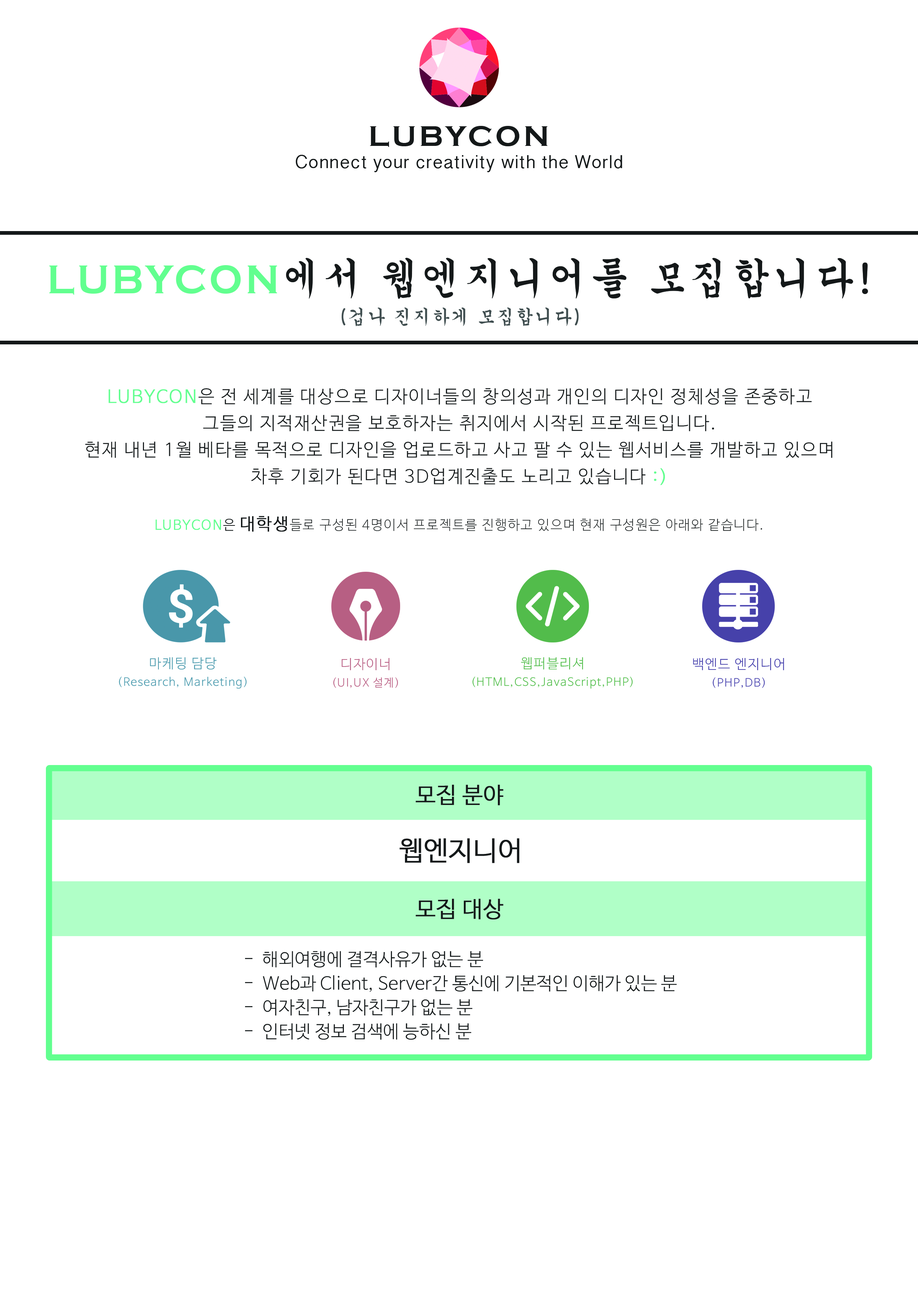
<style>
.page{position:relative;width:918px;height:1299px;background:#ffffff}
.page>*{position:absolute;margin:0}
.t1{font:29.6px "CopperplateGothic-Bold";letter-spacing:0.1em;color:#141819}
.t2{font:18.5px "TamilSangamMN";letter-spacing:0.05em;color:#141819}
.t3{font:42px/30.4px "Gungsuh";letter-spacing:0.075em;color:#141819;scale:0.93 1}
.t4{font:42px/30.4px "CopperplateGothic-Bold";letter-spacing:0.075em;color:#62ff8f;scale:0.93 1}
.t5{font:19.2px/30.4px "Gungsuh";letter-spacing:0.075em;color:#404e4f;scale:0.93 1}
.t6{font:17.8px/26.7px "NanumBarunGothicOTFLight";letter-spacing:0.075em;color:#141819}
.t7{font:17.8px/26.7px "NanumBarunGothicOTFLight";letter-spacing:0.075em;color:#62ff8f;font-weight:bold}
.t8{font:13.3px "NanumBarunGothicOTFUltraLight";letter-spacing:0.075em;color:#141819}
.t9{font:13.3px "NanumBarunGothicOTFLight";letter-spacing:0.075em;color:#62ff8f;font-weight:bold}
.t10{font:13.3px "NanumBarunGothicOTFLight";letter-spacing:0.075em;color:#141819}
.t11{font:16.7px "NanumBarunGothicOTFLight";letter-spacing:0.075em;color:#141819;font-weight:bold}
.t12{font:11.1px/17.8px "NanumBarunGothicOTFLight";letter-spacing:0.075em;color:#4997aa}
.t13{font:13.3px/17.8px "NanumBarunGothicOTFLight";letter-spacing:0.075em;color:#4997aa}
.t14{font:11.1px/17.8px "NanumBarunGothicOTFLight";letter-spacing:0.075em;color:#b75f83}
.t15{font:13.3px/17.8px "NanumBarunGothicOTFLight";letter-spacing:0.075em;color:#b75f83}
.t16{font:11.1px/17.8px "NanumBarunGothicOTFLight";letter-spacing:0.075em;color:#52bc4b}
.t17{font:13.3px/17.8px "NanumBarunGothicOTFLight";letter-spacing:0.075em;color:#52bc4b}
.t18{font:13.3px/17.8px "NanumBarunGothicOTFLight";letter-spacing:0.075em;color:#4641aa}
.t19{font:11.1px/17.8px "NanumBarunGothicOTFLight";letter-spacing:0.075em;color:#4641aa}
.t20{font:22.2px "NanumBarunGothicOTFLight";letter-spacing:0.01em;color:#141819;font-weight:bold}
.t21{font:26.7px "NanumBarunGothicOTFLight";letter-spacing:0.01em;color:#141819;font-weight:bold}
.t22{font:17.8px/24.1px "NanumBarunGothicOTFLight";letter-spacing:0.01em;color:#141819}
</style>
<div class="page">
<p class="t1" style="left:370px;top:126px;width:178px;height:21px">LUBYCON</p>
<p class="t2" style="left:296px;top:155px;width:326px;height:17px">Connect your creativity with the World</p>
<p class="t3" style="left:49px;top:258px;width:819px;height:68px;text-align:center"><span class="t4">LUBYCON</span>에서 웹엔지니어를 모집합니다!<br><span class="t5">(겁나 진지하게 모집합니다)</span></p>
<p class="t6" style="left:85px;top:388px;width:748px;height:97px;text-align:center"><span class="t7">LUBYCON</span>은 전 세계를 대상으로 디자이너들의 창의성과 개인의 디자인 정체성을 존중하고<br>그들의 지적재산권을 보호하자는 취지에서 시작된 프로젝트입니다.<br>현재 내년 1월 베타를 목적으로 디자인을 업로드하고 사고 팔 수 있는 웹서비스를 개발하고 있으며<br>차후 기회가 된다면 3D업계진출도 노리고 있습니다 <span class="t7">:)</span></p>
<p class="t8" style="left:155px;top:516px;width:607px;height:16px"><span class="t9">LUBYCON</span><span class="t10">은 </span><span class="t11">대학생</span>들로 구성된 4명이서 프로젝트를 진행하고 있으며 현재 구성원은 아래와 같습니다.</p>
<p class="t12" style="left:119px;top:657px;width:128px;height:32px;text-align:center"><span class="t13">마케팅 담당<br></span>(Research, Marketing)</p>
<p class="t14" style="left:333px;top:658px;width:65px;height:30px;text-align:center"><span class="t15">디자이너<br></span>(UI,UX 설계)</p>
<p class="t16" style="left:472px;top:657px;width:161px;height:32px;text-align:center"><span class="t17">웹퍼블리셔<br></span>(HTML,CSS,JavaScript,PHP)</p>
<p class="t18" style="left:693px;top:658px;width:91px;height:30px;text-align:center">백엔드 엔지니어<br><span class="t19">(PHP,DB)</span></p>
<p class="t20" style="left:416px;top:784px;width:88px;height:21px">모집 분야</p>
<p class="t21" style="left:399px;top:838px;width:120px;height:25px">웹엔지니어</p>
<p class="t20" style="left:416px;top:899px;width:88px;height:20px">모집 대상</p>
<p class="t22" style="left:245px;top:951px;width:432px;height:89px">-  해외여행에 결격사유가 없는 분<br>-  Web과 Client, Server간 통신에 기본적인 이해가 있는 분<br>-  여자친구, 남자친구가 없는 분<br>-  인터넷 정보 검색에 능하신 분</p>
</div>
